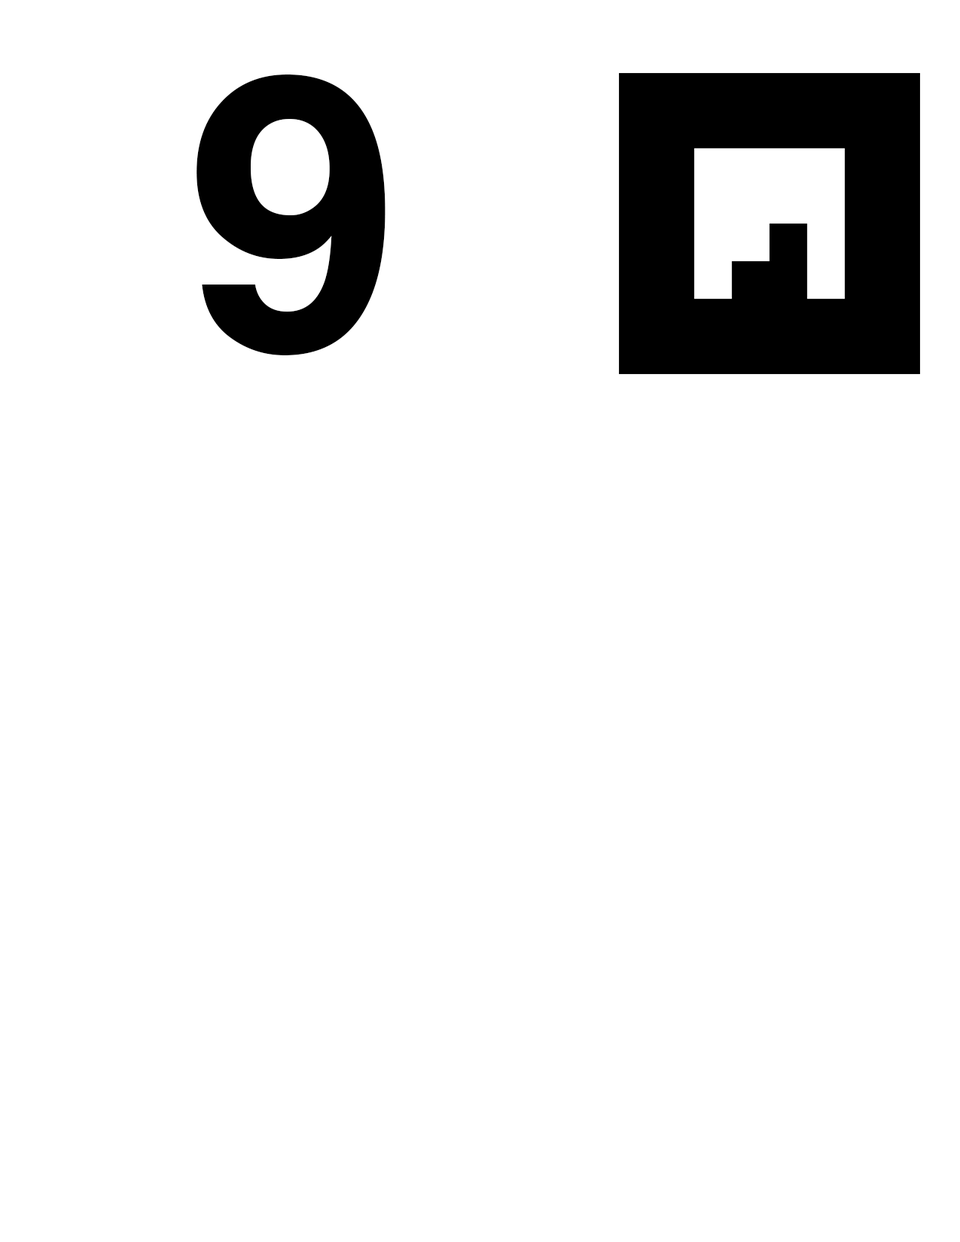
<style>
.page{position:relative;width:960px;height:1242px;background:#ffffff}
.page>*{position:absolute;margin:0}
.t1{font:382.7px "Helvetica-Bold";letter-spacing:0.01em;color:#000000}
</style>
<div class="page">
<p class="t1" style="left:196px;top:75px;width:189px;height:280px">9</p>
</div>
